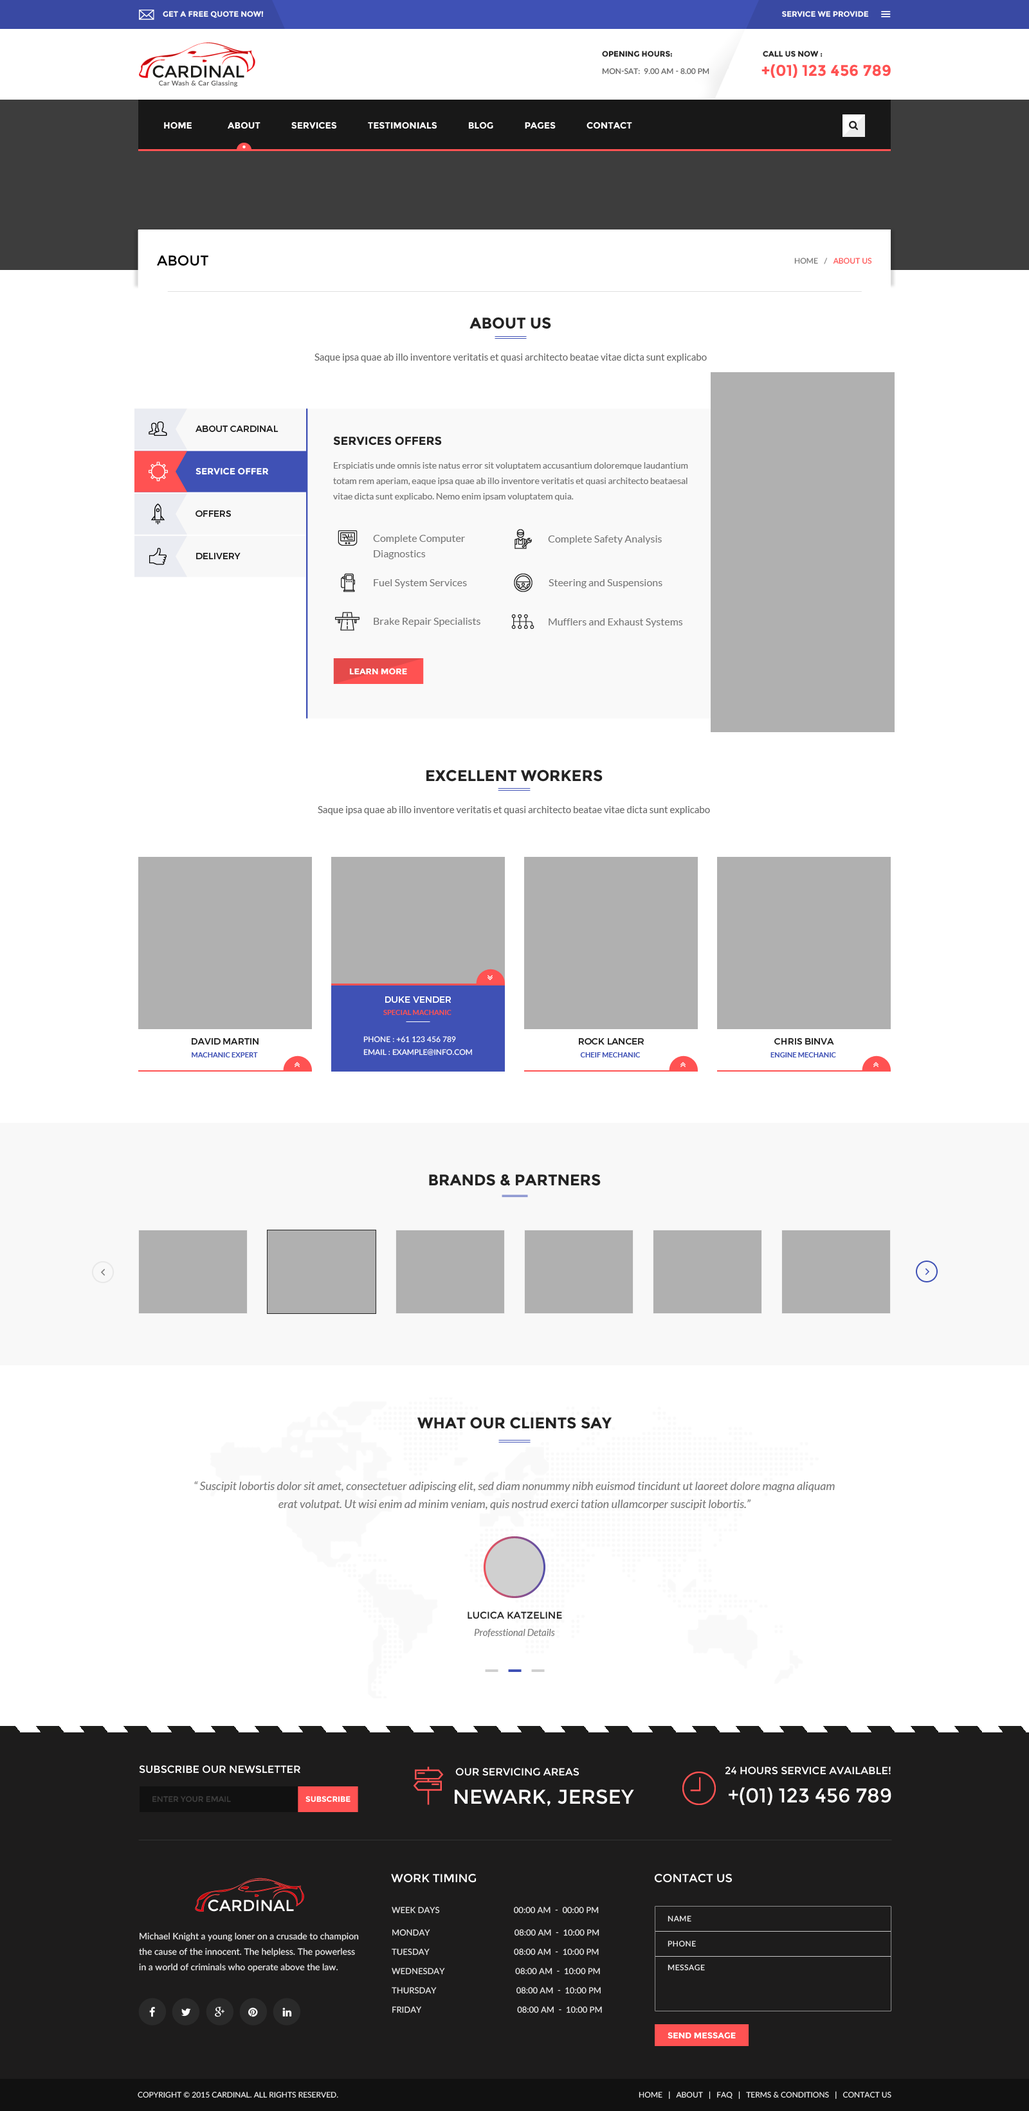
<style>
.page{position:relative;width:1029px;height:2111px;background:#ffffff}
.page>*{position:absolute;margin:0}
.t1{font:7.7px "Montserrat-Bold";color:#fbfbfb;text-transform:uppercase}
.t2{font:7.7px "Montserrat-Bold";color:#232323;text-transform:uppercase}
.t3{font:15.4px "Montserrat-Bold";color:#ff5252;text-transform:uppercase}
.t4{font:7.7px "Lato-Medium";color:#666666;text-transform:uppercase}
.t5{font:9px "Montserrat-Bold";color:#fffefe;text-transform:uppercase}
.t6{font:14.1px "Montserrat-Regular";color:#000000;text-transform:uppercase}
.t7{font:7.7px "Lato-Regular";color:#777777;text-transform:uppercase}
.t8{font:7.7px "Lato-Regular";color:#ff5252;text-transform:uppercase}
.t9{font:15.4px "Montserrat-Bold";color:#232323;text-transform:uppercase}
.t10{font:9.6px "Lato-Regular";color:#666666}
.t11{font:9px "Montserrat-Regular";color:#222222;text-transform:uppercase}
.t12{font:11.6px "Montserrat-Bold";color:#232323;text-transform:uppercase}
.t13{font:9px "Montserrat-Bold";color:#ffffff;text-transform:uppercase}
.t14{font:9px/15.4px "Lato-Regular";color:#777777}
.t15{font:10.3px/15.4px "Lato-Regular";color:#777777}
.t16{font:10.3px "Lato-Regular";color:#777777}
.t17{font:8.4px "Montserrat-Bold";color:#ffffff;text-transform:uppercase}
.t18{font:15.4px "Montserrat-Bold";color:#232323}
.t19{font:9px "Montserrat-Regular";color:#ffffff;text-transform:uppercase}
.t20{font:7.1px "Lato-Bold";color:#ff5252;text-transform:uppercase}
.t21{font:7.7px "Lato-Medium";color:#ffffff;text-transform:uppercase}
.t22{font:9px "Montserrat-Regular";color:#232323;text-transform:uppercase}
.t23{font:7.1px "Lato-Bold";color:#3f51b5;text-transform:uppercase}
.t24{font:11.6px/18px "Lato-Italic";color:#777777}
.t25{font:9.6px "Montserrat-Regular";color:#232323;text-transform:uppercase}
.t26{font:9.6px "Lato-Italic";color:#777777}
.t27{font:10.3px "Montserrat-Regular";color:#ffffff;text-transform:uppercase}
.t28{font:19.9px "Montserrat-Regular";color:#ffffff;text-transform:uppercase}
.t29{font:7.7px "Montserrat-Regular";color:#3f3f3f;text-transform:uppercase}
.t30{font:7.7px "Montserrat-Bold";color:#ffffff;text-transform:uppercase}
.t31{font:11.6px "Montserrat-Regular";color:#ffffff;text-transform:uppercase}
.t32{font:8.4px "Lato-Medium";color:#e8e8e8;text-transform:uppercase}
.t33{font:7.7px "Lato-Medium";letter-spacing:0.04em;color:#eeeeee;text-transform:uppercase}
.t34{font:9px/15.4px "Lato-Medium";color:#e8e8e8}
.t35{font:8.4px "Lato-Medium";color:#e8e8e8}
.t36{font:7.7px "Lato-Regular";color:#eeeeee;text-transform:uppercase}
</style>
<div class="page">
<p class="t1" style="left:782px;top:11px;width:87px;height:6px">service we provide</p>
<p class="t2" style="left:602px;top:51px;width:70px;height:6px">OPENING HOURS:</p>
<p class="t2" style="left:762px;top:51px;width:60px;height:6px">Call us now :</p>
<p class="t3" style="left:761px;top:64px;width:129px;height:14px">+(01) 123 456 789</p>
<p class="t4" style="left:602px;top:68px;width:107px;height:7px">MON-SAT:  9.00 AM - 8.00 Pm</p>
<p class="t5" style="left:164px;top:122px;width:468px;height:7px">Home             About             Services             Testimonials             Blog             pAGES             Contact</p>
<p class="t6" style="left:157px;top:255px;width:51px;height:11px">ABOUT</p>
<p class="t7" style="left:794px;top:258px;width:78px;height:6px">Home   /   <span class="t8">About Us</span></p>
<p class="t9" style="left:469px;top:317px;width:82px;height:12px">About us</p>
<p class="t10" style="left:314px;top:354px;width:392px;height:9px">Saque ipsa quae ab illo inventore veritatis et quasi architecto beatae vitae dicta sunt explicabo</p>
<p class="t11" style="left:195px;top:426px;width:83px;height:6px">About CARDINAL</p>
<p class="t12" style="left:333px;top:437px;width:109px;height:9px">SERVICES OFFERS</p>
<p class="t13" style="left:195px;top:467px;width:74px;height:8px">SERVICE OFFER</p>
<p class="t14" style="left:333px;top:462px;width:355px;height:39px">Erspiciatis unde omnis iste natus error sit voluptatem accusantium doloremque laudantium totam rem aperiam, eaque ipsa quae ab illo inventore veritatis et quasi architecto beataesal vitae dicta sunt explicabo. Nemo enim ipsam voluptatem quia.</p>
<p class="t11" style="left:195px;top:510px;width:36px;height:7px">OFFERS</p>
<p class="t15" style="left:373px;top:535px;width:92px;height:24px">Complete Computer <br>Diagnostics</p>
<p class="t16" style="left:548px;top:536px;width:114px;height:8px">Complete Safety Analysis</p>
<p class="t11" style="left:196px;top:553px;width:44px;height:6px">DELIVERY</p>
<p class="t16" style="left:374px;top:579px;width:93px;height:9px">Fuel System Services</p>
<p class="t16" style="left:548px;top:579px;width:114px;height:9px">Steering and Suspensions</p>
<p class="t16" style="left:374px;top:618px;width:106px;height:9px">Brake Repair Specialists</p>
<p class="t16" style="left:548px;top:618px;width:135px;height:9px">Mufflers and Exhaust Systems</p>
<p class="t17" style="left:349px;top:668px;width:58px;height:7px">learn more</p>
<p class="t18" style="left:426px;top:770px;width:176px;height:12px">EXCELLENT WORKERS</p>
<p class="t10" style="left:318px;top:806px;width:392px;height:9px">Saque ipsa quae ab illo inventore veritatis et quasi architecto beatae vitae dicta sunt explicabo</p>
<p class="t19" style="left:385px;top:996px;width:66px;height:7px">duke vender</p>
<p class="t20" style="left:383px;top:1010px;width:68px;height:5px">special machanic</p>
<p class="t21" style="left:363px;top:1036px;width:93px;height:7px">phone : +61 123 456 789</p>
<p class="t22" style="left:192px;top:1038px;width:66px;height:7px">David Martin</p>
<p class="t21" style="left:363px;top:1048px;width:109px;height:8px">Email : example@info.com</p>
<p class="t22" style="left:579px;top:1038px;width:65px;height:7px">rock lancer</p>
<p class="t22" style="left:774px;top:1038px;width:60px;height:7px">chris binva</p>
<p class="t23" style="left:192px;top:1052px;width:66px;height:6px">machanic Expert</p>
<p class="t23" style="left:580px;top:1052px;width:60px;height:6px">cheif mechanic</p>
<p class="t23" style="left:770px;top:1052px;width:66px;height:6px">engine mechanic</p>
<p class="t18" style="left:429px;top:1174px;width:171px;height:12px">BRANDS &amp; PARTNERS</p>
<p class="t18" style="left:417px;top:1417px;width:194px;height:12px">WHAT OUR CLIENTS SAY</p>
<p class="t24" style="left:194px;top:1481px;width:640px;height:29px;text-align:center">“ Suscipit lobortis dolor sit amet, consectetuer adipiscing elit, sed diam nonummy nibh euismod tincidunt ut laoreet dolore magna aliquam erat volutpat. Ut wisi enim ad minim veniam, quis nostrud exerci tation ullamcorper suscipit lobortis.”</p>
<p class="t25" style="left:467px;top:1612px;width:95px;height:7px">Lucica Katzeline</p>
<p class="t26" style="left:474px;top:1629px;width:81px;height:8px">Professtional Details</p>
<p class="t27" style="left:139px;top:1765px;width:161px;height:9px">subscribe our newsletter</p>
<p class="t27" style="left:455px;top:1768px;width:124px;height:8px">OUR SERVICING AREAS</p>
<p class="t27" style="left:724px;top:1767px;width:166px;height:8px">24 HOURS SERVICE AVAILABLE!</p>
<p class="t28" style="left:455px;top:1789px;width:179px;height:17px">Newark, Jersey</p>
<p class="t28" style="left:728px;top:1787px;width:163px;height:18px">+(01) 123 456 789</p>
<p class="t29" style="left:152px;top:1796px;width:79px;height:7px">enter your email</p>
<p class="t30" style="left:305px;top:1796px;width:45px;height:7px">Subscribe</p>
<p class="t31" style="left:391px;top:1873px;width:85px;height:10px">Work Timing</p>
<p class="t31" style="left:654px;top:1873px;width:78px;height:10px">contact us</p>
<p class="t32" style="left:392px;top:1907px;width:206px;height:7px">Week Days                                   00:00 am  -  00:00 pm</p>
<p class="t33" style="left:667px;top:1916px;width:24px;height:6px">Name</p>
<p class="t34" style="left:139px;top:1932px;width:220px;height:40px">Michael Knight a young loner on a crusade to champion the cause of the innocent. The helpless. The powerless in a world of criminals who operate above the law.</p>
<p class="t32" style="left:392px;top:1929px;width:207px;height:7px"><span class="t35">MONDAY                                     </span>08:00 am  -  10:00 pm</p>
<p class="t32" style="left:392px;top:1949px;width:206px;height:7px"><span class="t35">TUESDAY                                     </span>08:00 am  -  10:00 pm</p>
<p class="t33" style="left:667px;top:1941px;width:29px;height:6px">Phone</p>
<p class="t32" style="left:392px;top:1968px;width:208px;height:7px"><span class="t35">WEDNESDAY                               </span>08:00 am  -  10:00 pm</p>
<p class="t33" style="left:667px;top:1965px;width:38px;height:6px">Message</p>
<p class="t32" style="left:392px;top:1987px;width:208px;height:7px"><span class="t35">THURSDAY                                   </span>08:00 am  -  10:00 pm</p>
<p class="t32" style="left:392px;top:2006px;width:210px;height:7px"><span class="t35">FRIDAY                                          </span>08:00 am  -  10:00 pm</p>
<p class="t17" style="left:667px;top:2032px;width:68px;height:7px">Send message</p>
<p class="t36" style="left:138px;top:2092px;width:200px;height:6px">Copyright © 2015 CARDINAL. All Rights Reserved.</p>
<p class="t36" style="left:638px;top:2091px;width:253px;height:9px">Home   |   About   |   FAQ   |   Terms &amp; Conditions   |   Contact Us</p>
</div>
